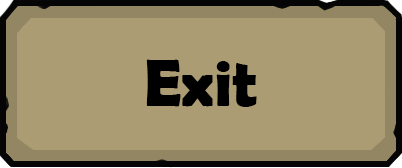
<style>
.page{position:relative;width:402px;height:168px;background:#ac9c73}
.page>*{position:absolute;margin:0}
.t1{font:66.7px "BerlinSansFBDemi-Bold";color:#000000}
</style>
<div class="page">
<p class="t1" style="left:146px;top:59px;width:111px;height:48px">Exit</p>
</div>
